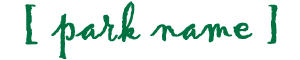
<style>
.page{position:relative;width:300px;height:60px;background:#ffffff}
.page>*{position:absolute;margin:0}
.t1{font:47.8px "Gigi-Regular";color:#007241;font-weight:bold}
</style>
<div class="page">
<p class="t1" style="left:25px;top:1px;width:253px;height:58px">[ park name ]</p>
</div>
